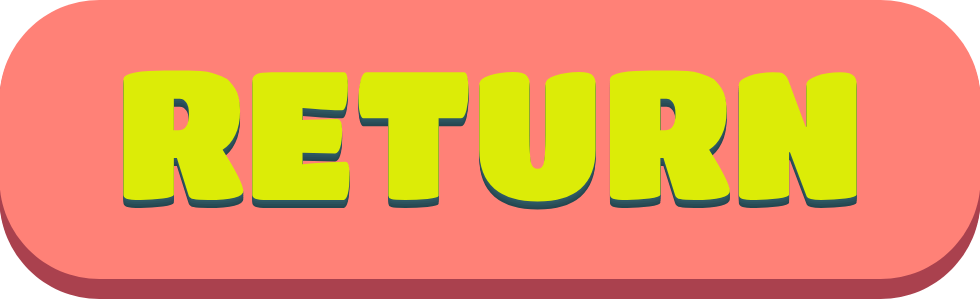
<style>
.page{position:relative;width:980px;height:300px;background:#ff8177}
.page>*{position:absolute;margin:0}
.t1{font:180px "TitanOne";color:#dcec07}
</style>
<div class="page">
<p class="t1" style="left:123px;top:70px;width:734px;height:132px">RETURN</p>
</div>
